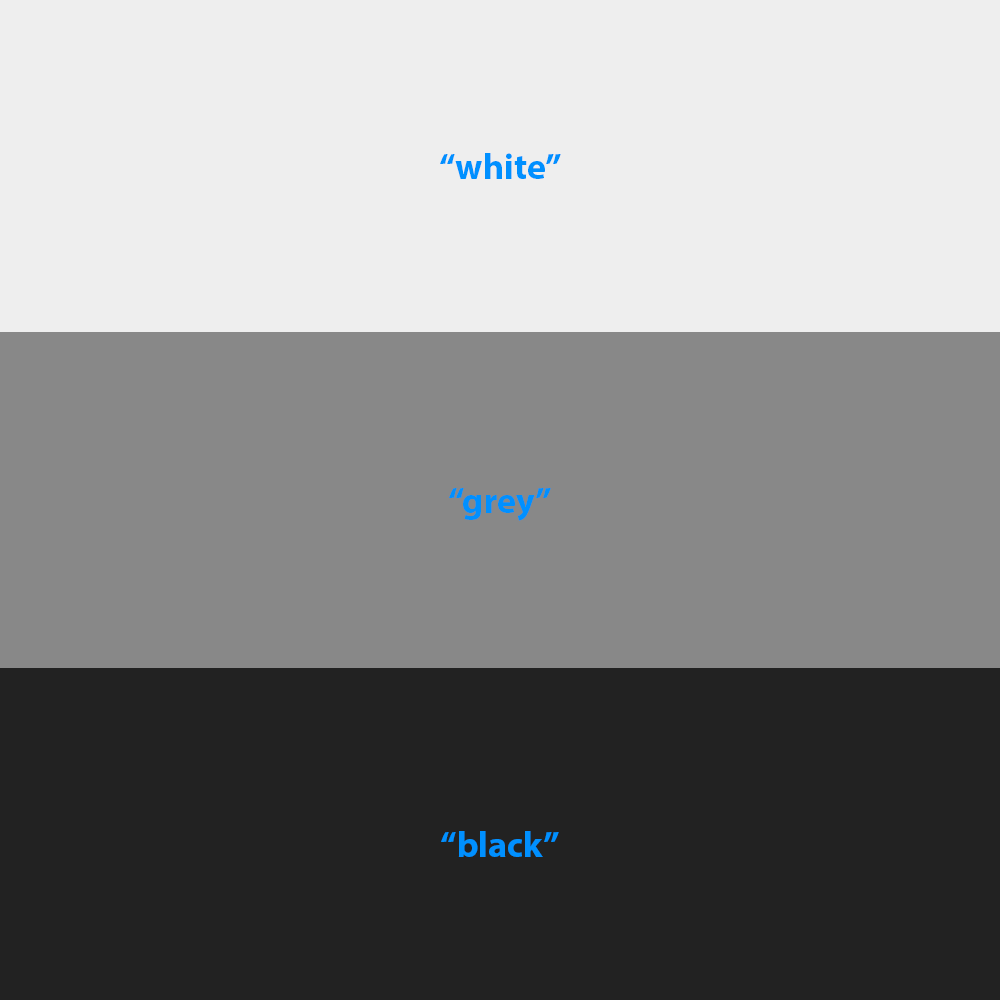
<style>
.page{position:relative;width:1000px;height:1000px;background:#888888}
.page>*{position:absolute;margin:0}
.t1{font:36px "MyriadPro-Bold";color:#0090ff}
</style>
<div class="page">
<p class="t1" style="left:440px;top:153px;width:121px;height:26px">“white”</p>
<p class="t1" style="left:449px;top:488px;width:102px;height:33px">“grey”</p>
<p class="t1" style="left:441px;top:831px;width:118px;height:26px">“black”</p>
</div>
